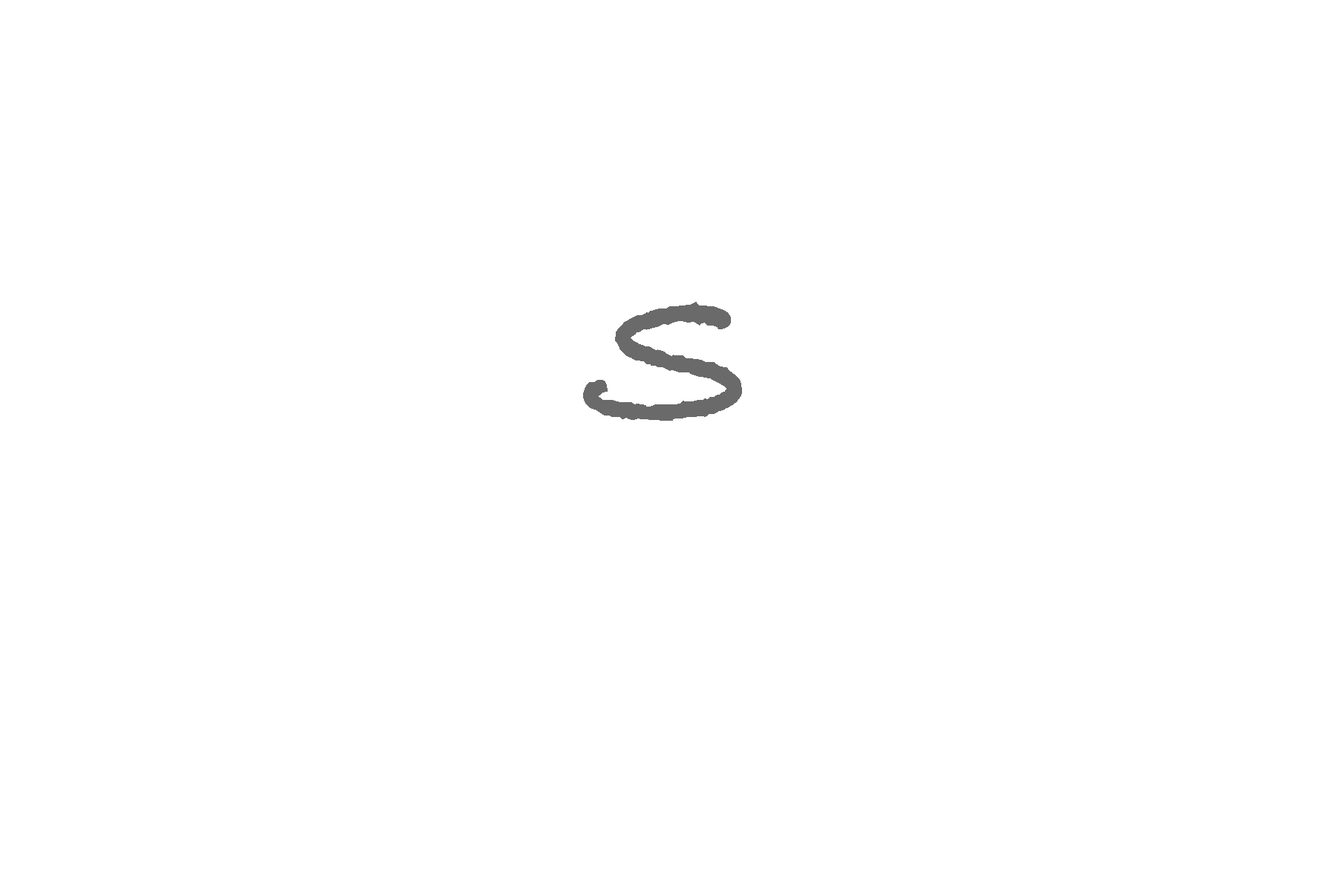
<style>
.page{position:relative;width:1337px;height:892px;background:#ffffff}
.page>*{position:absolute;margin:0}
.t1{font:222.9px "BradleyHandITCTT-Bold";color:#6a6a6a}
</style>
<div class="page">
<p class="t1" style="left:583px;top:302px;width:159px;height:119px">S</p>
</div>
